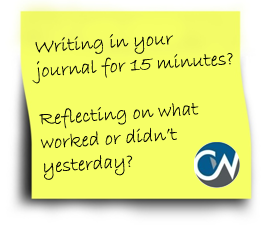
<style>
.page{position:relative;width:277px;height:230px;background:#f6ff66}
.page>*{position:absolute;margin:0}
.t1{font:20px "BradleyHandITC";color:#000000}
</style>
<div class="page">
<p class="t1" style="left:32px;top:34px;width:201px;height:146px;rotate:-4deg">Writing in your<br>journal for 15 minutes?<br><br>Reflecting on what<br>worked or didn’t<br>yesterday?</p>
</div>
